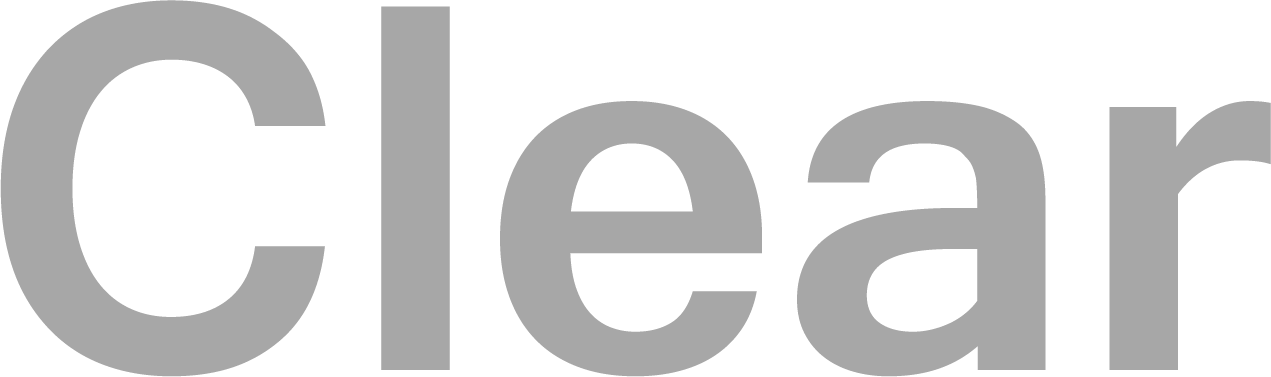
<style>
.page{position:relative;width:1271px;height:377px;background:#ffffff}
.page>*{position:absolute;margin:0}
.t1{font:550px "Gautami-Bold";color:#a7a7a7}
</style>
<div class="page">
<p class="t1" style="left:0px;top:0px;width:1271px;height:377px">Clear</p>
</div>
